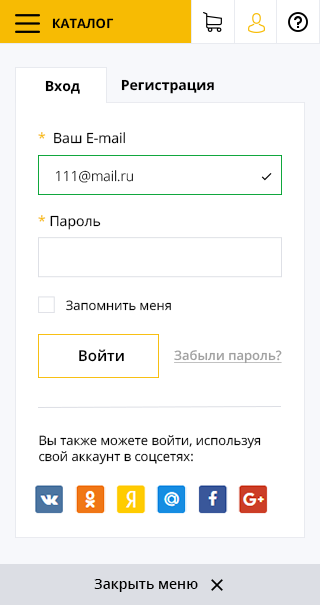
<style>
.page{position:relative;width:320px;height:605px;background:#ffffff}
.page>*{position:absolute;margin:0}
.t1{font:13px "OpenSans-Bold";color:#000000;text-transform:uppercase}
.t2{font:14px "OpenSans-Bold";color:#000000}
.t3{font:14px "OpenSans";color:#000000}
.t4{font:14px "OpenSans";color:#f7bb03}
.t5{font:14px "OpenSans-Light"}
.t6{font:13px "OpenSans";color:#000000}
.t7{font:15px "OpenSans-Semibold";color:#000000}
.t8{font:13px "OpenSans-Semibold";color:#a1a1a1;text-decoration:underline}
.t9{font:14px "OpenSans-Semibold";color:#000000}
</style>
<div class="page">
<p class="t1" style="left:52px;top:18px;width:62px;height:11px">Каталог</p>
<p class="t2" style="left:45px;top:80px;width:35px;height:14px">Вход</p>
<p class="t2" style="left:121px;top:79px;width:93px;height:15px">Регистрация</p>
<p class="t3" style="left:38px;top:132px;width:87px;height:12px"><span class="t4">*  </span>Ваш E-mail</p>
<p class="t5" style="left:56px;top:170px;width:77px;height:13px">111@mail.ru</p>
<p class="t3" style="left:38px;top:215px;width:63px;height:15px">* Пароль</p>
<p class="t6" style="left:66px;top:300px;width:105px;height:11px">Запомнить меня</p>
<p class="t7" style="left:79px;top:349px;width:45px;height:13px">Войти</p>
<p class="t8" style="left:174px;top:350px;width:108px;height:14px">Забыли пароль?</p>
<p class="t6" style="left:39px;top:435px;width:222px;height:30px">Вы также можете войти, используя<br>свой аккаунт в соцсетях:</p>
<p class="t9" style="left:94px;top:579px;width:104px;height:13px">Закрыть меню</p>
</div>
